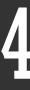
<style>
.page{position:relative;width:30px;height:90px;background:#333333}
.page>*{position:absolute;margin:0}
.t1{font:95.4px "Rockwell-Condensed";color:#ffffff}
</style>
<div class="page">
<p class="t1" style="left:1px;top:7px;width:31px;height:72px">4</p>
</div>
